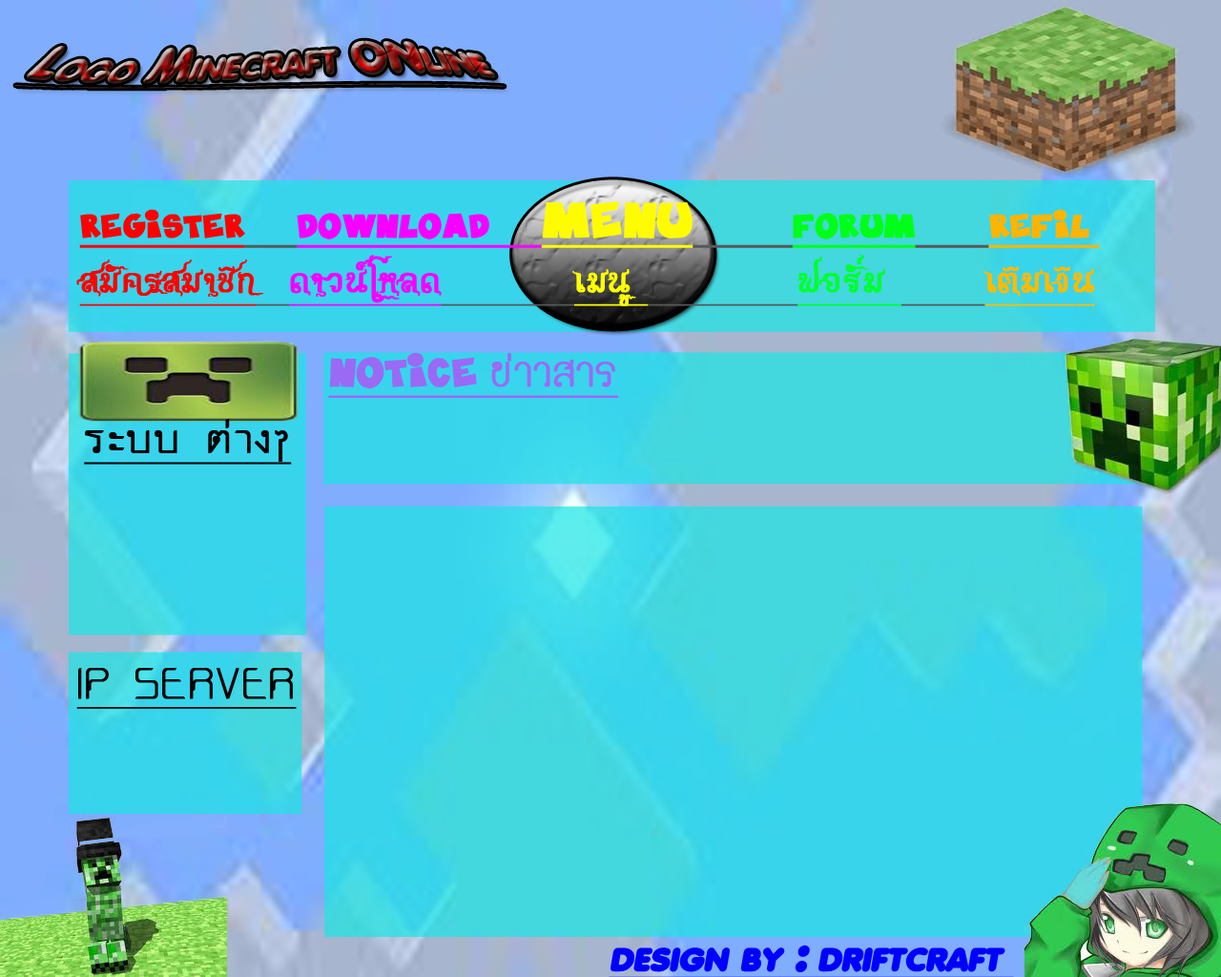
<style>
.page{position:relative;width:1221px;height:977px}
.page>*{position:absolute;margin:0}
.t1{font:45.8px "AnjaElianeaccent-Nornal";letter-spacing:-0.01em;font-variant:small-caps;font-style:italic;text-decoration:underline}
.t2{font:45.8px "AlsmileArounvilas";color:#ff0000;font-weight:bold;text-decoration:underline}
.t3{font:38.2px "BlablaHawk";color:#ff0000;font-weight:bold;text-decoration:underline}
.t4{font:38.2px "BlablaHawk";color:#f600ff;font-weight:bold;text-decoration:underline}
.t5{font:57.2px "BlablaHawk";color:#fffc00;font-weight:bold;text-decoration:underline}
.t6{font:38.2px "BlablaHawk";color:#00ff18;font-weight:bold;text-decoration:underline}
.t7{font:38.2px "BlablaHawk";color:#ffb400;font-weight:bold;text-decoration:underline}
.t8{font:45.8px "AlsmileArounvilas";color:#f600ff;font-weight:bold;text-decoration:underline}
.t9{font:45.8px "AlsmileArounvilas";color:#fcff00;font-weight:bold;text-decoration:underline}
.t10{font:45.8px "AlsmileArounvilas";color:#00ff30;font-weight:bold;text-decoration:underline}
.t11{font:45.8px "AlsmileArounvilas";color:#ffba00;font-weight:bold;text-decoration:underline}
.t12{font:45.8px "2555edcrubhuajuckTH-Bold";color:#9a6af5;font-weight:bold;text-decoration:underline}
.t13{font:45.8px "BlablaHawk";color:#9a6af5;font-weight:bold;text-decoration:underline}
.t14{font:52.5px "2554edcrubArtnarong";color:#000000;font-weight:bold;text-decoration:underline}
.t15{font:45.8px "2554edcrubArtnarong";color:#000000;font-weight:bold;text-decoration:underline}
.t16{font:45.8px "AnjaElianeaccent-Nornal";letter-spacing:-0.01em;color:#0000ff;font-variant:small-caps;font-style:italic;text-decoration:underline}
</style>
<div class="page">
<p class="t1" style="left:15px;top:40px;width:490px;height:49px">Logo Minecraft ONline</p>
<p class="t2" style="left:76px;top:201px;width:1024px;height:105px"><span class="t3">Register     </span><span class="t4">DOWNLOAD     </span><span class="t5">Menu         </span><span class="t6">FORUM       </span><span class="t7">REFIL <br></span>สมัครสมาชิก  <span class="t8">ดาวน์โหลด        </span><span class="t9">เมนู          </span><span class="t10">ฟอรั่ม      </span><span class="t11">เติมเงิน</span></p>
<p class="t12" style="left:328px;top:352px;width:291px;height:46px"><span class="t13">Notice </span>ข่าวสาร</p>
<p class="t14" style="left:84px;top:419px;width:208px;height:46px">ระบบ ต่างๆ</p>
<p class="t15" style="left:76px;top:668px;width:221px;height:41px">IP SERVER</p>
<p class="t16" style="left:609px;top:944px;width:405px;height:33px">design by : driftcraft</p>
</div>
